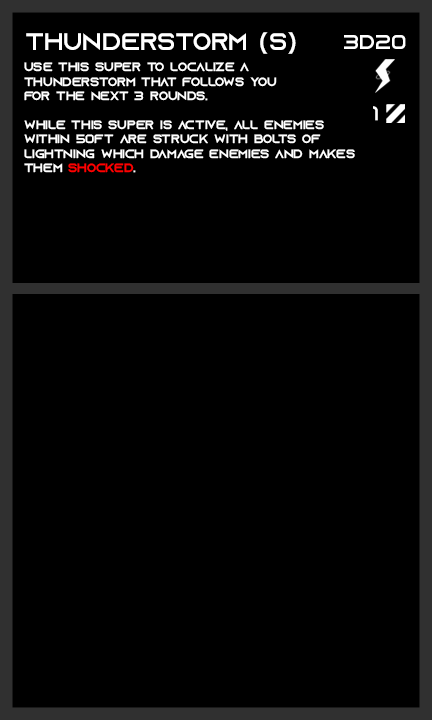
<style>
.page{position:relative;width:432px;height:720px;background:#000000}
.page>*{position:absolute;margin:0}
.t1{font:24px "AzonixRegular";color:#ffffff}
.t2{font:20px "AzonixRegular";color:#ffffff}
.t3{font:12px "AzonixRegular";color:#ffffff}
.t4{font:12px "AzonixRegular";color:#ff0000}
</style>
<div class="page">
<p class="t1" style="left:26px;top:32px;width:270px;height:22px">thunderstorm (s)</p>
<p class="t2" style="left:344px;top:35px;width:62px;height:14px">3d20</p>
<p class="t3" style="left:24px;top:62px;width:331px;height:111px">use this super to localize a <br>thunderstorm that follows you<br>for the next 3 rounds.<br><br>while this super is active, all enemies <br>within 50ft are struck with bolts of <br>lightning which damage enemies and makes <br>them <span class="t4">shocked</span>.</p>
<p class="t2" style="left:373px;top:106px;width:5px;height:15px">1</p>
</div>
